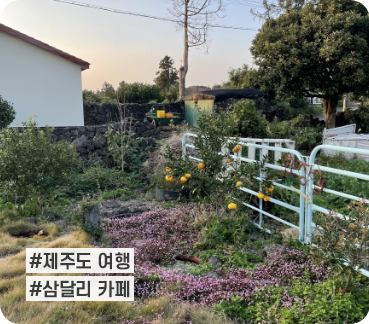
<style>
.page{position:relative;width:369px;height:324px}
.page>*{position:absolute;margin:0}
.t1{font:18px/28px "S-CoreDream-6Bold";letter-spacing:-0.025em;color:#3a3a3a}
</style>
<div class="page">
<p class="t1" style="left:29px;top:252px;width:101px;height:46px">#제주도 여행<br>#삼달리 카페</p>
</div>
